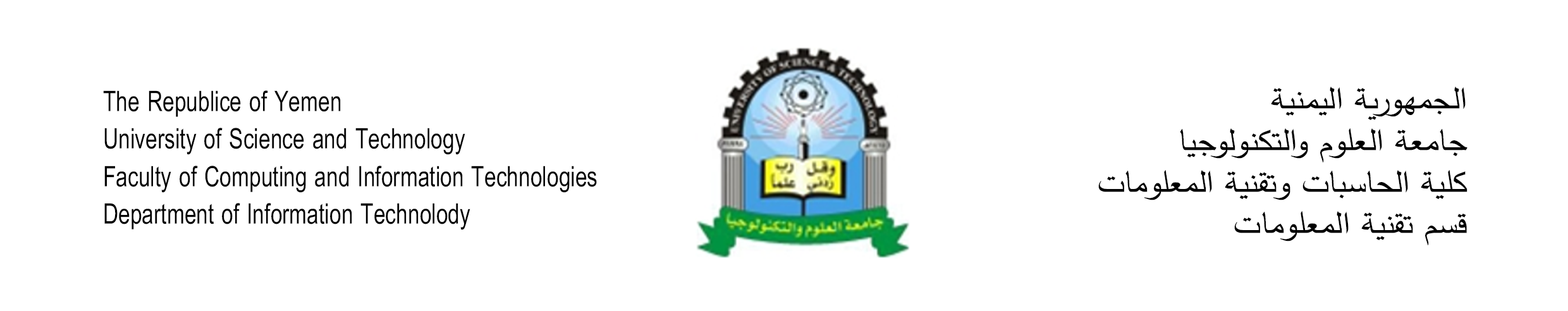
<style>
.page{position:relative;width:1568px;height:311px;background:#ffffff}
.page>*{position:absolute;margin:0}
.t1{font:34.7px "SimplifiedArabic";color:#000000;scale:1.08 1}
.t2{font:31.4px "SimplifiedArabic";color:#000000;scale:0.75 1}
</style>
<div class="page">
<p class="t1" style="left:1098px;top:87px;width:369px;height:159px">الجمهورية اليمنية<br>جامعة العلوم والتكنولوجيا<br>كلية الحاسبات وتقنية المعلومات<br>قسم تقنية المعلومات</p>
<p class="t2" style="left:103px;top:90px;width:494px;height:140px;text-align:right">The Republice of Yemen<br>University of Science and Technology<br>Faculty of Computing and Information Technologies<br>Department of Information Technolody</p>
</div>
